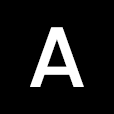
<style>
.page{position:relative;width:114px;height:114px;background:#000000}
.page>*{position:absolute;margin:0}
.t1{font:85.7px "Poppins-Medium";color:#ffffff;text-transform:uppercase}
</style>
<div class="page">
<p class="t1" style="left:30px;top:27px;width:54px;height:60px">A</p>
</div>
